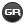
<style>
.page{position:relative;width:25px;height:25px;background:#ffffff}
.page>*{position:absolute;margin:0}
.t1{font:9.7px "BatmanForeverAlternate";letter-spacing:-0.03em;color:#ffffff;scale:1.03 1}
</style>
<div class="page">
<p class="t1" style="left:4px;top:9px;width:17px;height:7px">gr</p>
</div>
